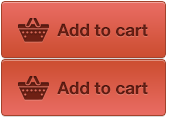
<style>
.page{position:relative;width:175px;height:122px}
.page>*{position:absolute;margin:0}
.t1{font:17px "HelveticaNeueLTCom-Bd";color:#621c12}
</style>
<div class="page">
<p class="t1" style="left:57px;top:23px;width:91px;height:14px">Add to cart</p>
<p class="t1" style="left:57px;top:81px;width:91px;height:14px">Add to cart</p>
</div>
